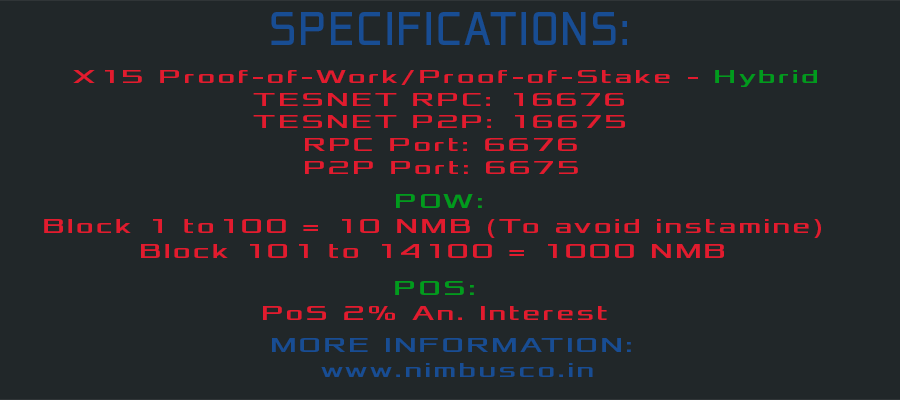
<style>
.page{position:relative;width:900px;height:400px;background:#212729}
.page>*{position:absolute;margin:0}
.t1{font:50px "Xolonium";letter-spacing:0.1em;color:#184d93;scale:0.6 1}
.t2{font:19px "Xolonium";letter-spacing:0.1em;color:#e21b2e;scale:1.31 1}
.t3{font:19px "Xolonium";letter-spacing:0.1em;color:#009c1d;scale:1.31 1}
.t4{font:20.8px "Xolonium";letter-spacing:0.1em;color:#e21b2e;scale:1.2 1}
.t5{font:20.8px "Xolonium";letter-spacing:0.1em;color:#009c1d;scale:1.2 1}
.t6{font:20.8px "Xolonium";letter-spacing:0.1em;color:#184d93;scale:1.2 1}
</style>
<div class="page">
<p class="t1" style="left:271px;top:12px;width:356px;height:33px">SPECIFICATIONS:</p>
<p class="t2" style="left:73px;top:70px;width:744px;height:104px">X15 Proof-of-Work/Proof-of-Stake - <span class="t3">Hybrid<br></span>     TESNET RPC: 16676<br>     TESNET P2P: 16675<br>          RPC Port: 6676<br>            P2P Port: 6675</p>
<p class="t4" style="left:44px;top:194px;width:777px;height:64px;text-align:center"><span class="t5">  POW: <br></span>Block 1 to100 = 10 NMB (To avoid instamine)<br>Block 101 to 14100 = 1000 NMB</p>
<p class="t4" style="left:263px;top:281px;width:344px;height:39px;text-align:center"><span class="t5">POS:<br></span>PoS 2% An. Interest</p>
<p class="t6" style="left:272px;top:338px;width:359px;height:39px;text-align:center">MORE INFORMATION: <br>www.nimbusco.in</p>
</div>
